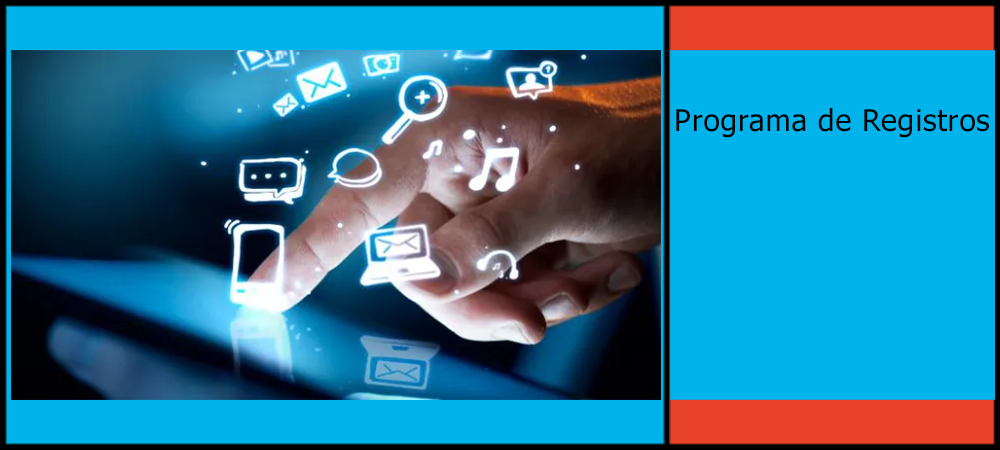
<style>
.page{position:relative;width:1000px;height:450px;background:#00b3eb}
.page>*{position:absolute;margin:0}
.t1{font:30px "Tahoma";letter-spacing:0.025em;color:#000000}
</style>
<div class="page">
<p class="t1" style="left:676px;top:108px;width:313px;height:30px">Programa de Registros</p>
</div>
